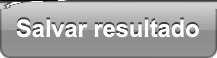
<style>
.page{position:relative;width:217px;height:58px}
.page>*{position:absolute;margin:0}
.t1{font:23.8px "Arial-BoldMT";color:#ffffff}
</style>
<div class="page">
<p class="t1" style="left:16px;top:19px;width:183px;height:19px">Salvar resultado</p>
</div>
